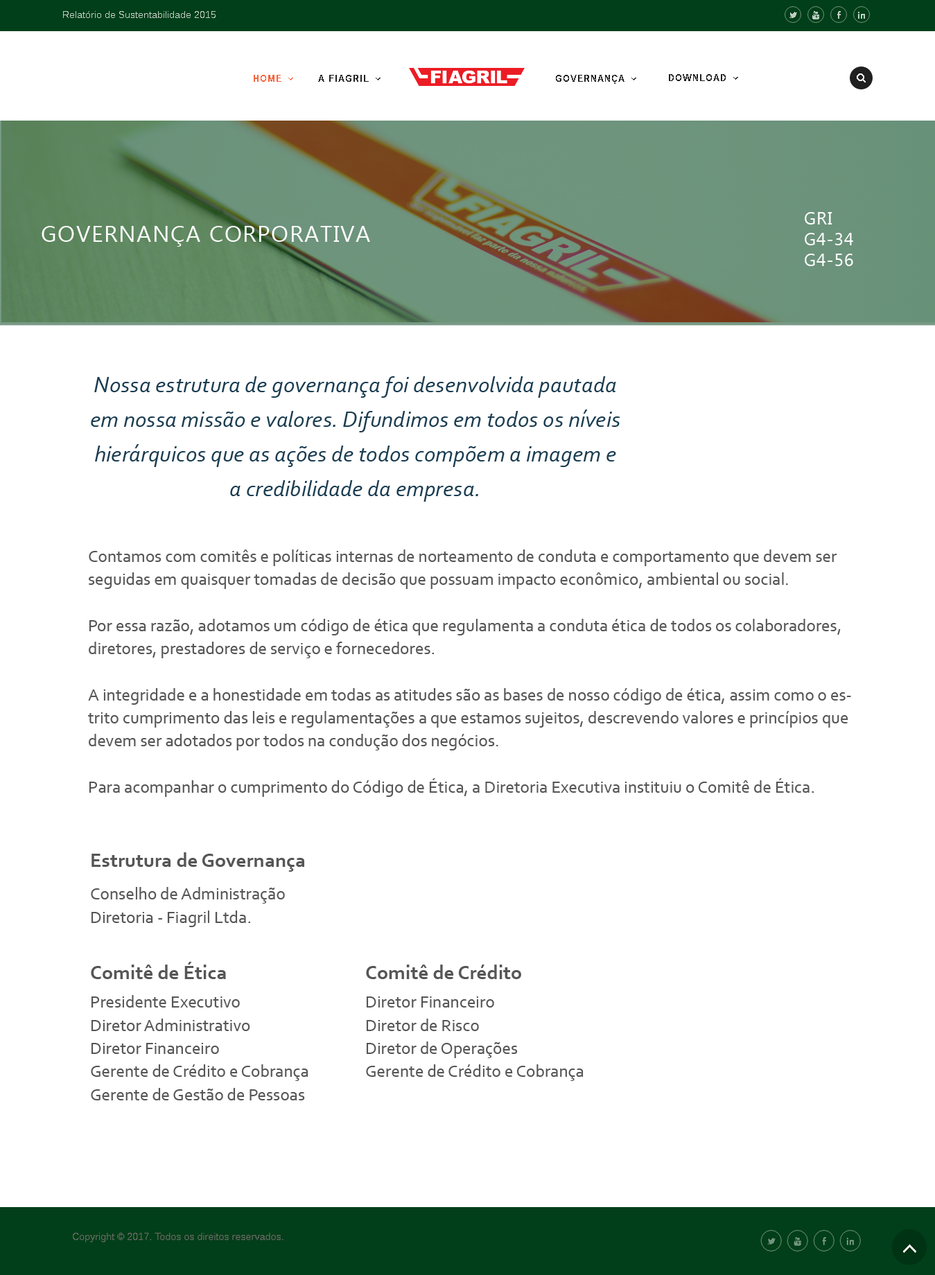
<style>
.page{position:relative;width:935px;height:1275px;background:#ffffff}
.page>*{position:absolute;margin:0}
.t1{font:17.3px "Ebrima";letter-spacing:0.04em;color:#ffffff}
.t2{font:23.1px "Ebrima";letter-spacing:0.04em;color:#ffffff}
.t3{font:23.1px/34.7px "Corbel-Italic";color:#1b3d51}
.t4{font:17.3px/23.1px "Corbel";color:#565656}
.t5{font:20.2px "Corbel-Bold";color:#565656}
</style>
<div class="page">
<p class="t1" style="left:805px;top:212px;width:48px;height:54px;text-align:justify">GRI<br>G4-34<br>G4-56</p>
<p class="t2" style="left:42px;top:226px;width:328px;height:21px">GOVERNANÇA CORPORATIVA</p>
<p class="t3" style="left:91px;top:376px;width:529px;height:126px;text-align:center">Nossa estrutura de governança foi desenvolvida pautada em nossa missão e valores. Difundimos em todos os níveis hierárquicos que as ações de todos compõem a imagem e a credibilidade da empresa.</p>
<p class="t4" style="left:88px;top:550px;width:763px;height:247px">Contamos com comitês e políticas internas de norteamento de conduta e comportamento que devem ser seguidas em quaisquer tomadas de decisão que possuam impacto econômico, ambiental ou social.<br><br>Por essa razão, adotamos um código de ética que regulamenta a conduta ética de todos os colaboradores, diretores, prestadores de serviço e fornecedores. <br><br>A integridade e a honestidade em todas as atitudes são as bases de nosso código de ética, assim como o estrito cumprimento das leis e regulamentações a que estamos sujeitos, descrevendo valores e princípios que devem ser adotados por todos na condução dos negócios.<br><br>Para acompanhar o cumprimento do Código de Ética, a Diretoria Executiva instituiu o Comitê de Ética.</p>
<p class="t5" style="left:91px;top:853px;width:213px;height:19px">Estrutura de Governança</p>
<p class="t4" style="left:91px;top:887px;width:194px;height:40px">Conselho de Administração<br>Diretoria - Fiagril Ltda.</p>
<p class="t5" style="left:91px;top:962px;width:135px;height:17px">Comitê de Ética</p>
<p class="t5" style="left:366px;top:965px;width:155px;height:14px">Comitê de Crédito</p>
<p class="t4" style="left:91px;top:995px;width:217px;height:106px">Presidente Executivo<br>Diretor Administrativo<br>Diretor Financeiro<br>Gerente de Crédito e Cobrança<br>Gerente de Gestão de Pessoas</p>
<p class="t4" style="left:366px;top:997px;width:218px;height:84px">Diretor Financeiro<br>Diretor de Risco<br>Diretor de Operações<br>Gerente de Crédito e Cobrança</p>
</div>
